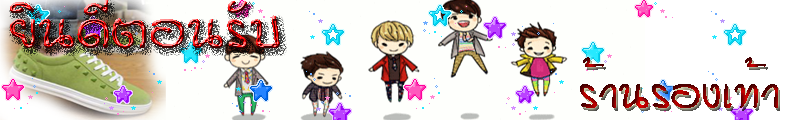
<style>
.page{position:relative;width:800px;height:120px;background:#fefffc}
.page>*{position:absolute;margin:0}
.t1{font:72px "Eak-Toomtam-UNI"}
.t2{font:60px "Eak-Toomtam-UNI"}
</style>
<div class="page">
<p class="t1" style="left:10px;top:0px;width:270px;height:49px">ยินดีตอนรับ</p>
<p class="t2" style="left:580px;top:57px;width:198px;height:51px">ร้านรองเท้า</p>
</div>
